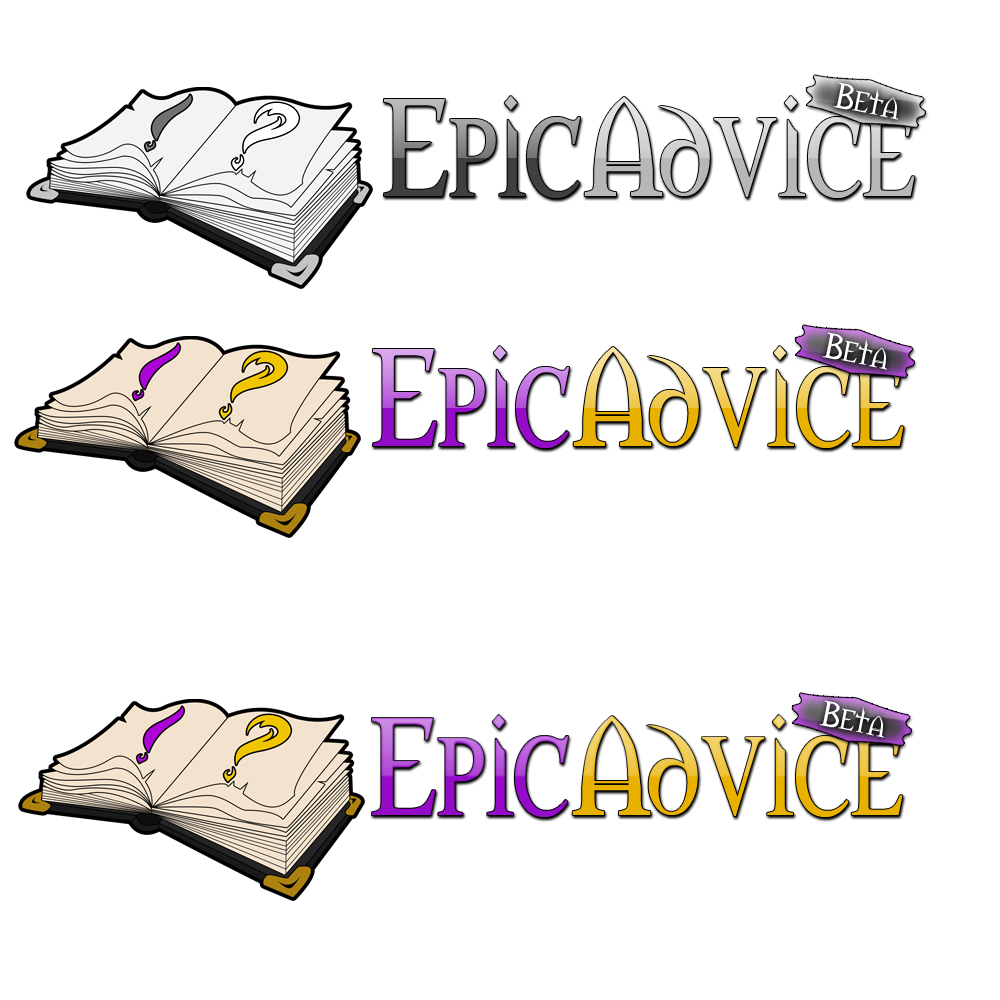
<style>
.page{position:relative;width:1000px;height:1000px;background:#ffffff}
.page>*{position:absolute;margin:0}
.t1{font:33.3px "Morpheus";color:#ffffff}
.t2{font:128.7px "Morpheus";scale:0.88 1}
</style>
<div class="page">
<p class="t1" style="left:833px;top:82px;width:65px;height:38px;rotate:12deg">Beta</p>
<p class="t1" style="left:822px;top:332px;width:65px;height:38px;rotate:12deg">Beta</p>
<p class="t2" style="left:373px;top:346px;width:531px;height:102px">EpicAdvice</p>
<p class="t1" style="left:819px;top:700px;width:65px;height:38px;rotate:12deg">Beta</p>
<p class="t2" style="left:372px;top:715px;width:531px;height:102px">EpicAdvice</p>
</div>
